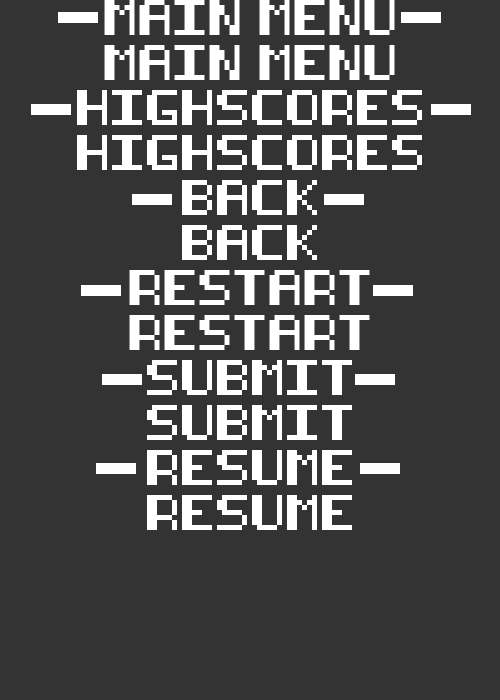
<style>
.page{position:relative;width:500px;height:700px;background:#333333}
.page>*{position:absolute;margin:0}
.t1{font:30px "8-bit-pusab";color:#ffffff}
</style>
<div class="page">
<p class="t1" style="left:104px;top:0px;width:291px;height:35px">MAIN MENU</p>
<p class="t1" style="left:104px;top:45px;width:291px;height:35px">MAIN MENU</p>
<p class="t1" style="left:77px;top:90px;width:345px;height:35px">HIGHSCORES</p>
<p class="t1" style="left:77px;top:135px;width:345px;height:35px">HIGHSCORES</p>
<p class="t1" style="left:182px;top:180px;width:135px;height:35px">BACK</p>
<p class="t1" style="left:182px;top:225px;width:135px;height:35px">BACK</p>
<p class="t1" style="left:129px;top:270px;width:241px;height:35px">RESTART</p>
<p class="t1" style="left:129px;top:315px;width:241px;height:35px">RESTART</p>
<p class="t1" style="left:147px;top:360px;width:205px;height:35px">SUBMIT</p>
<p class="t1" style="left:147px;top:405px;width:205px;height:35px">SUBMIT</p>
<p class="t1" style="left:147px;top:450px;width:205px;height:35px">RESUME</p>
<p class="t1" style="left:147px;top:495px;width:205px;height:35px">RESUME</p>
</div>
